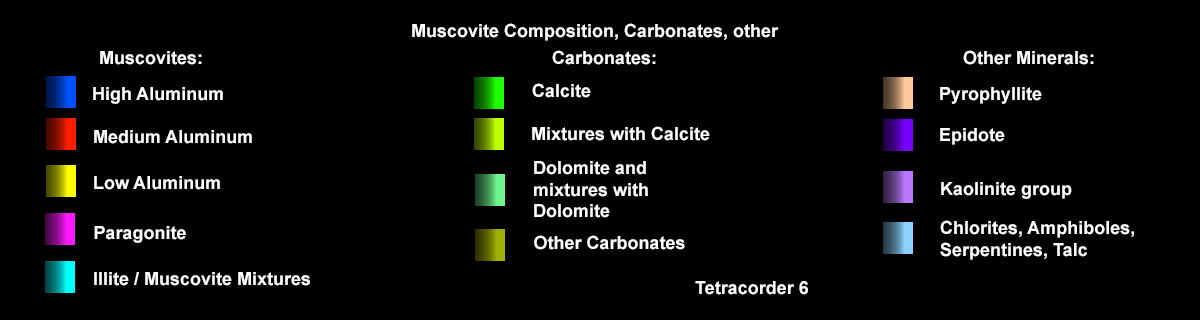
<style>
.page{position:relative;width:1200px;height:320px;background:#000000}
.page>*{position:absolute;margin:0}
.t1{font:18px "Arial-BoldMT";color:#fffefe}
.t2{font:18px "Arial-BoldMT";color:#ffffff}
</style>
<div class="page">
<p class="t1" style="left:412px;top:23px;width:367px;height:18px">Muscovite Composition, Carbonates, other</p>
<p class="t1" style="left:100px;top:51px;width:102px;height:14px">Muscovites:</p>
<p class="t1" style="left:552px;top:50px;width:104px;height:15px">Carbonates:</p>
<p class="t1" style="left:963px;top:50px;width:131px;height:15px">Other Minerals:</p>
<p class="t1" style="left:93px;top:87px;width:130px;height:17px">High Aluminum</p>
<p class="t1" style="left:532px;top:83px;width:59px;height:15px">Calcite</p>
<p class="t1" style="left:940px;top:87px;width:102px;height:17px">Pyrophyllite</p>
<p class="t1" style="left:532px;top:126px;width:178px;height:15px">Mixtures with Calcite</p>
<p class="t1" style="left:94px;top:130px;width:158px;height:14px">Medium Aluminum</p>
<p class="t1" style="left:940px;top:128px;width:65px;height:17px">Epidote</p>
<p class="t1" style="left:534px;top:161px;width:114px;height:57px">Dolomite and<br>mixtures with<br>Dolomite</p>
<p class="t1" style="left:94px;top:176px;width:126px;height:14px">Low Aluminum</p>
<p class="t1" style="left:941px;top:182px;width:131px;height:17px">Kaolinite group</p>
<p class="t1" style="left:940px;top:220px;width:194px;height:40px">Chlorites, Amphiboles,<br>Serpentines, Talc</p>
<p class="t1" style="left:94px;top:226px;width:92px;height:17px">Paragonite</p>
<p class="t2" style="left:534px;top:235px;width:151px;height:15px">Other Carbonates</p>
<p class="t1" style="left:94px;top:272px;width:216px;height:14px">Illite / Muscovite Mixtures</p>
<p class="t1" style="left:695px;top:281px;width:113px;height:14px">Tetracorder 6</p>
</div>
